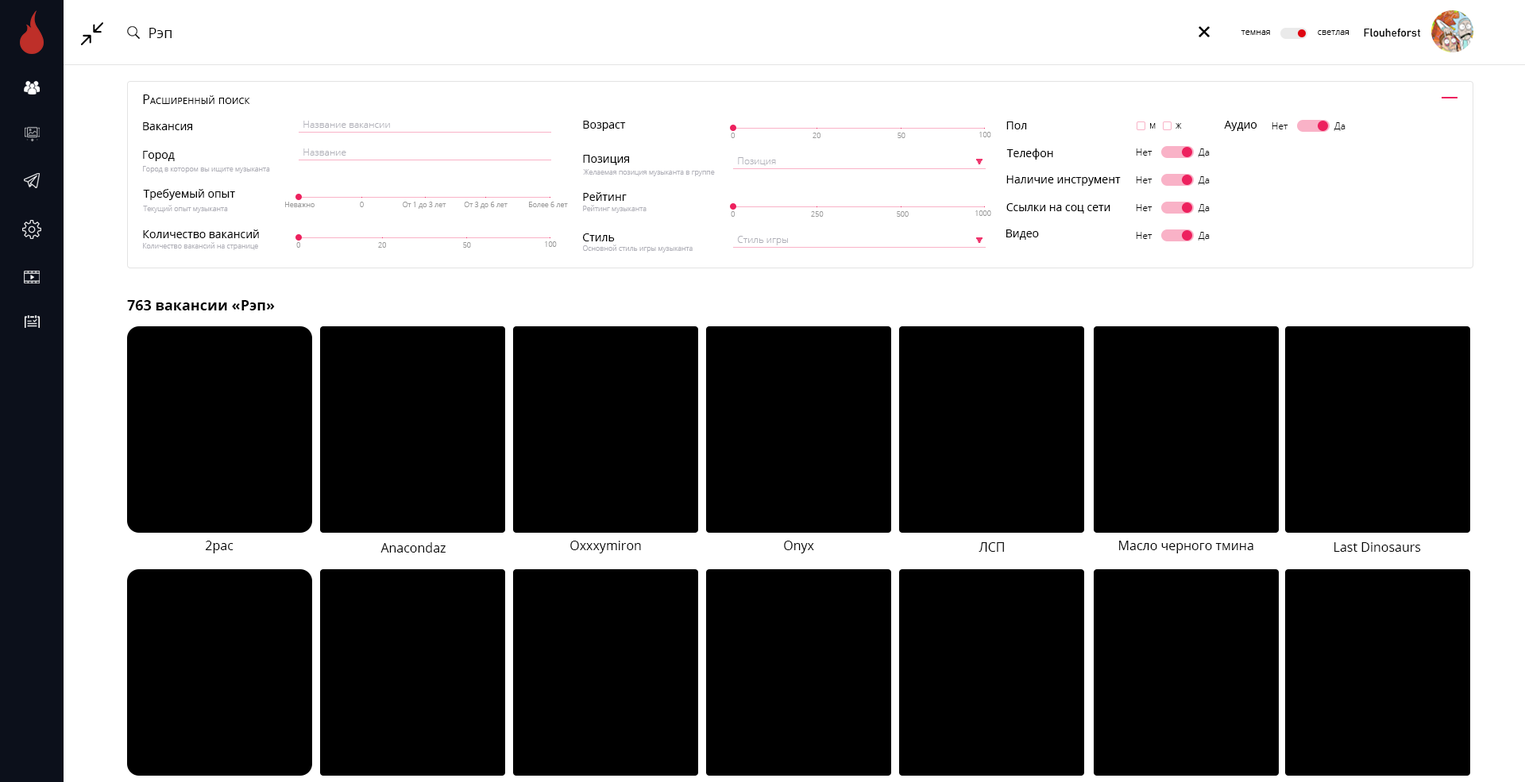
<style>
.page{position:relative;width:1525px;height:782px;background:#ffffff}
.page>*{position:absolute;margin:0}
.t1{font:14.3px "OpenSans";color:#000000}
.t2{font:11.1px "Bahnschrift";color:#000000}
.t3{font:8.7px "OpenSans-Light";color:#000000}
.t4{font:12.7px "OpenSans";color:#000000;font-variant:small-caps}
.t5{font:11.1px "OpenSans";color:#000000}
.t6{font:9.5px "OpenSans-Light";color:#afafb7}
.t7{font:7.1px "OpenSans-Light";color:#000000}
.t8{font:9.5px "OpenSans-Light";color:#000000}
.t9{font:7.1px "OpenSans-Light";color:#9a9a9a}
.t10{font:7.1px "OpenSans-Light";color:#afafb7}
.t11{font:14.3px "OpenSans-Bold";color:#000000}
.t12{font:12.7px "OpenSans";color:#000000}
</style>
<div class="page">
<p class="t1" style="left:149px;top:28px;width:23px;height:10px">Рэп</p>
<p class="t2" style="left:1363px;top:28px;width:58px;height:9px">Flouheforst</p>
<p class="t3" style="left:1240px;top:30px;width:30px;height:5px">темная</p>
<p class="t3" style="left:1317px;top:30px;width:31px;height:5px">светлая</p>
<p class="t4" style="left:143px;top:94px;width:107px;height:10px">Расширенный поиск</p>
<p class="t5" style="left:143px;top:122px;width:49px;height:8px">Вакансия</p>
<p class="t6" style="left:303px;top:121px;width:87px;height:7px">Название вакансии</p>
<p class="t5" style="left:583px;top:121px;width:43px;height:10px">Возраст</p>
<p class="t5" style="left:1006px;top:121px;width:21px;height:8px">Пол</p>
<p class="t7" style="left:1150px;top:123px;width:5px;height:6px">М</p>
<p class="t7" style="left:1175px;top:123px;width:7px;height:6px">Ж</p>
<p class="t5" style="left:1224px;top:121px;width:33px;height:10px">Аудио</p>
<p class="t8" style="left:1271px;top:122px;width:17px;height:7px">Нет</p>
<p class="t8" style="left:1333px;top:122px;width:12px;height:9px">Да</p>
<p class="t9" style="left:731px;top:133px;width:3px;height:5px">0</p>
<p class="t9" style="left:812px;top:133px;width:8px;height:5px">20</p>
<p class="t9" style="left:897px;top:133px;width:8px;height:5px">50</p>
<p class="t9" style="left:979px;top:132px;width:12px;height:5px">100</p>
<p class="t6" style="left:303px;top:148px;width:43px;height:8px">Название</p>
<p class="t5" style="left:1006px;top:148px;width:47px;height:12px">Телефон</p>
<p class="t8" style="left:1135px;top:148px;width:17px;height:8px">Нет</p>
<p class="t8" style="left:1197px;top:148px;width:12px;height:9px">Да</p>
<p class="t5" style="left:143px;top:151px;width:32px;height:10px">Город</p>
<p class="t5" style="left:583px;top:155px;width:46px;height:10px">Позиция</p>
<p class="t6" style="left:738px;top:157px;width:38px;height:9px">Позиция</p>
<p class="t10" style="left:143px;top:166px;width:127px;height:7px">Город в котором вы ищите музыканта</p>
<p class="t10" style="left:583px;top:169px;width:132px;height:7px">Желаемая позиция музыканта в группе</p>
<p class="t5" style="left:1006px;top:175px;width:114px;height:11px">Наличие инструмент</p>
<p class="t8" style="left:1135px;top:176px;width:17px;height:7px">Нет</p>
<p class="t8" style="left:1197px;top:176px;width:12px;height:9px">Да</p>
<p class="t5" style="left:143px;top:189px;width:92px;height:11px">Требуемый опыт</p>
<p class="t5" style="left:583px;top:192px;width:44px;height:9px">Рейтинг</p>
<p class="t10" style="left:143px;top:205px;width:85px;height:8px">Текущий опыт музыканта</p>
<p class="t9" style="left:285px;top:202px;width:29px;height:5px">Неважно</p>
<p class="t9" style="left:360px;top:202px;width:4px;height:5px">0</p>
<p class="t9" style="left:403px;top:202px;width:43px;height:7px">От 1 до 3 лет</p>
<p class="t9" style="left:464px;top:202px;width:43px;height:7px">От 3 до 6 лет</p>
<p class="t9" style="left:529px;top:202px;width:39px;height:5px">Более 6 лет</p>
<p class="t10" style="left:583px;top:205px;width:63px;height:8px">Рейтинг музыканта</p>
<p class="t5" style="left:1006px;top:203px;width:104px;height:11px">Ссылки на соц сети</p>
<p class="t8" style="left:1135px;top:204px;width:17px;height:7px">Нет</p>
<p class="t8" style="left:1197px;top:204px;width:12px;height:9px">Да</p>
<p class="t9" style="left:731px;top:211px;width:3px;height:6px">0</p>
<p class="t9" style="left:811px;top:211px;width:12px;height:6px">250</p>
<p class="t9" style="left:896px;top:211px;width:12px;height:6px">500</p>
<p class="t9" style="left:975px;top:210px;width:16px;height:6px">1000</p>
<p class="t5" style="left:143px;top:229px;width:116px;height:9px">Количество вакансий</p>
<p class="t5" style="left:583px;top:233px;width:32px;height:8px">Стиль</p>
<p class="t5" style="left:1006px;top:229px;width:33px;height:11px">Видео</p>
<p class="t8" style="left:1135px;top:232px;width:17px;height:7px">Нет</p>
<p class="t8" style="left:1197px;top:232px;width:12px;height:9px">Да</p>
<p class="t10" style="left:143px;top:242px;width:115px;height:8px">Количество вакансий на странице</p>
<p class="t9" style="left:296px;top:242px;width:4px;height:6px">0</p>
<p class="t9" style="left:378px;top:242px;width:8px;height:6px">20</p>
<p class="t9" style="left:463px;top:242px;width:8px;height:6px">50</p>
<p class="t9" style="left:545px;top:241px;width:12px;height:6px">100</p>
<p class="t10" style="left:583px;top:245px;width:109px;height:8px">Основной стиль игры музыканта</p>
<p class="t6" style="left:737px;top:236px;width:51px;height:9px">Стиль игры</p>
<p class="t11" style="left:127px;top:300px;width:148px;height:10px">763 вакансии «Рэп»</p>
<p class="t12" style="left:205px;top:541px;width:28px;height:12px">2pac</p>
<p class="t12" style="left:380px;top:542px;width:65px;height:11px">Anacondaz</p>
<p class="t12" style="left:570px;top:541px;width:71px;height:12px">Oxxxymiron</p>
<p class="t12" style="left:784px;top:541px;width:30px;height:12px">Onyx</p>
<p class="t12" style="left:978px;top:542px;width:26px;height:10px">ЛСП</p>
<p class="t12" style="left:1119px;top:541px;width:134px;height:12px">Масло черного тмина</p>
<p class="t12" style="left:1334px;top:542px;width:87px;height:10px">Last Dinosaurs</p>
</div>
